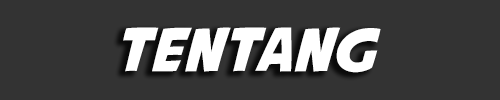
<style>
.page{position:relative;width:500px;height:100px;background:#333333}
.page>*{position:absolute;margin:0}
.t1{font:60px "AvengeanceMightiestAvenger";color:#ffffff}
</style>
<div class="page">
<p class="t1" style="left:123px;top:27px;width:258px;height:46px">Tentang</p>
</div>
